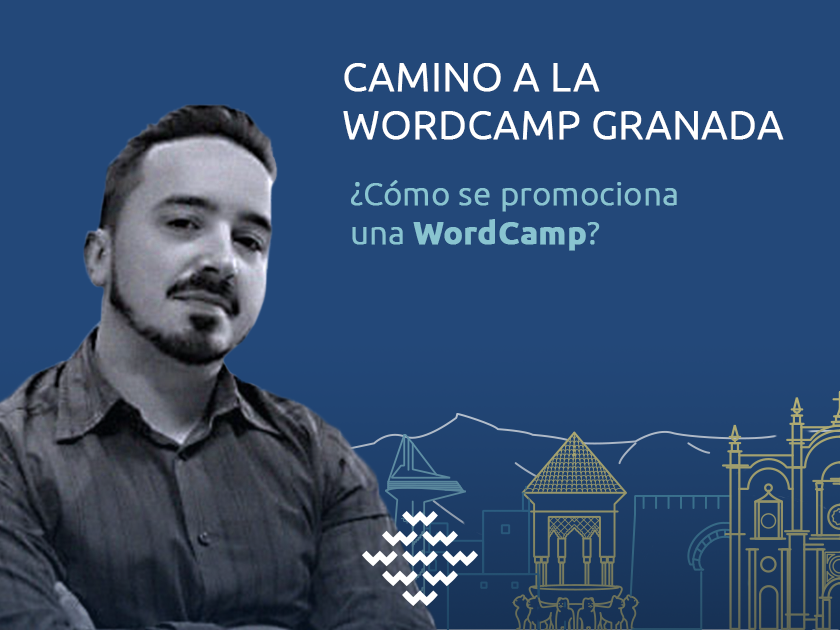
<style>
.page{position:relative;width:840px;height:630px;background:#234879}
.page>*{position:absolute;margin:0}
.t1{font:40px "Ubuntu-Light";color:#ffffff;text-transform:uppercase;font-weight:bold}
.t2{font:32px "Ubuntu-Light";color:#89c4d0;font-weight:bold}
.t3{font:32px "Ubuntu-Light";color:#89c4d0;text-transform:uppercase;font-weight:bold}
.t4{font:32px "Ubuntu-Bold";color:#89c4d0;font-weight:bold}
</style>
<div class="page">
<p class="t1" style="left:343px;top:63px;width:441px;height:77px">Camino a la <br>WordCamp Granada</p>
<p class="t2" style="left:351px;top:180px;width:326px;height:71px"><span class="t3">¿C</span>ómo se promociona <br>una <span class="t4">WordCamp</span><span class="t3">?</span></p>
</div>
